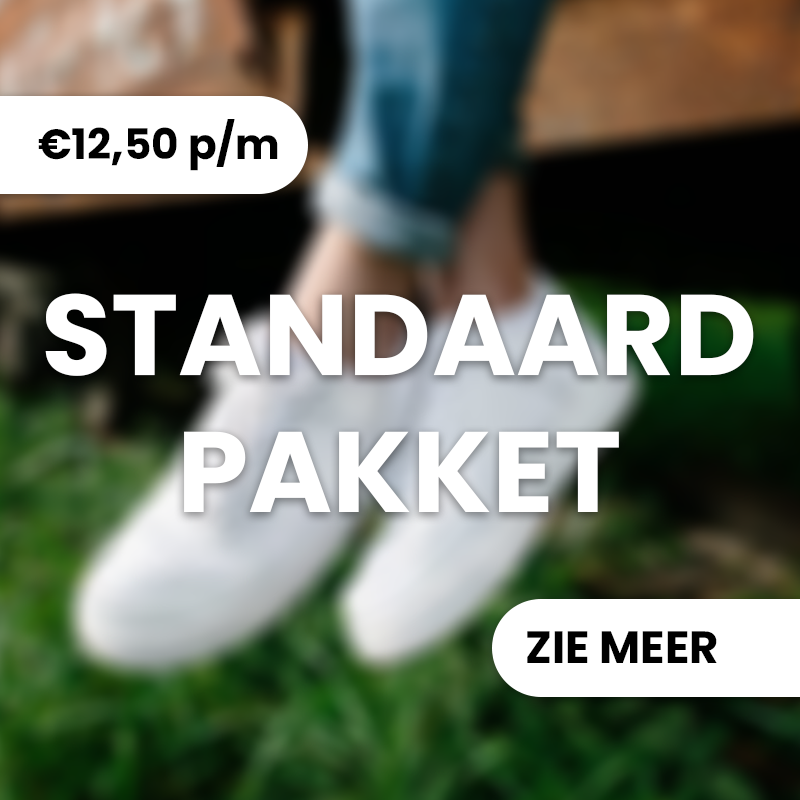
<style>
.page{position:relative;width:800px;height:800px}
.page>*{position:absolute;margin:0}
.t1{font:42.2px "Poppins-Bold";color:#000000}
.t2{font:114.3px "Poppins-Bold";color:#ffffff}
.t3{font:45.1px "Poppins-Bold";color:#000000}
</style>
<div class="page">
<p class="t1" style="left:38px;top:119px;width:240px;height:52px">€12,50 p/m</p>
<p class="t2" style="left:45px;top:293px;width:709px;height:219px;text-align:center">STANDAARD<br>PAKKET</p>
<p class="t3" style="left:527px;top:631px;width:190px;height:32px">ZIE MEER</p>
</div>
